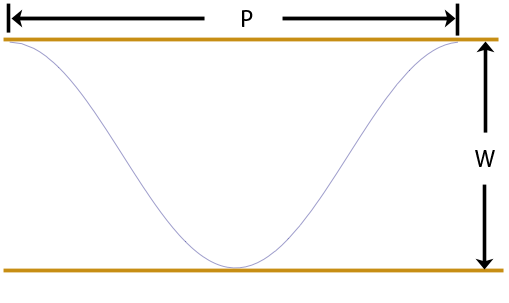
<style>
.page{position:relative;width:509px;height:303px;background:#ffffff}
.page>*{position:absolute;margin:0}
.t1{font:24px "MyriadPro-Regular";color:#000000}
</style>
<div class="page">
<p class="t1" style="left:242px;top:10px;width:11px;height:17px">P</p>
<p class="t1" style="left:475px;top:150px;width:20px;height:17px">W</p>
</div>
